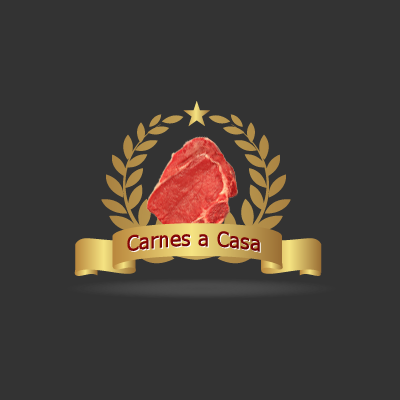
<style>
.page{position:relative;width:400px;height:400px;background:#333333}
.page>*{position:absolute;margin:0}
.t1{font:21.6px "Verdana";letter-spacing:0.025em;color:#7d0505;scale:0.83 1}
.t2{font:21.6px "Verdana";letter-spacing:0.025em;scale:0.83 1}
</style>
<div class="page">
<p class="t1" style="left:127px;top:231px;width:133px;height:21px">Carnes a Casa</p>
<p class="t2" style="left:128px;top:232px;width:133px;height:21px">Carnes a Casa</p>
</div>
